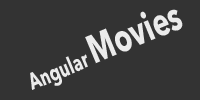
<style>
.page{position:relative;width:200px;height:100px;background:#333333}
.page>*{position:absolute;margin:0}
.t1{font:23.3px "AvenirNext-Bold";color:#ebebeb;scale:0.7 1}
.t2{font:39.9px "AvenirNext-Bold";color:#ebebeb;scale:0.7 1}
</style>
<div class="page">
<p class="t1" style="left:30px;top:9px;width:153px;height:81px;rotate:-23deg">Angular <span class="t2">Movies</span></p>
</div>
